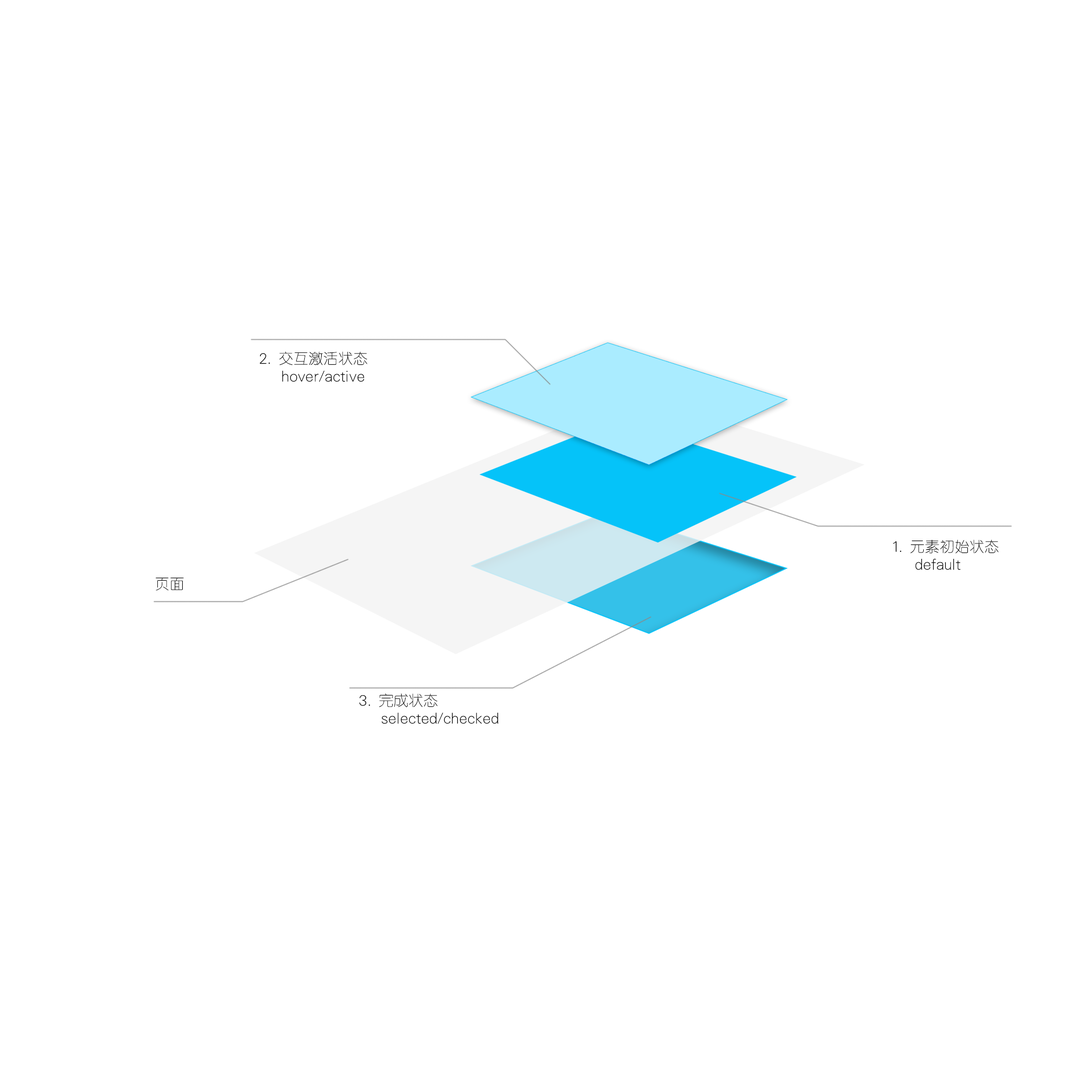
<style>
.page{position:relative;width:1092px;height:1092px;background:#ffffff}
.page>*{position:absolute;margin:0}
.t1{font:14.9px/17.9px "CloudYuanXiGBK";color:#000000}
.t2{font:14.9px/17.9px "CloudYuanXiGBK";color:#000000;text-transform:uppercase}
.t3{font:14.9px "CloudYuanXiGBK";color:#000000}
</style>
<div class="page">
<p class="t1" style="left:260px;top:351px;width:107px;height:31px"><span class="t2">2. 交互激活状态<br>   </span>hover/active</p>
<p class="t2" style="left:893px;top:540px;width:106px;height:30px">1. 元素初始状态<br>   <span class="t1">default</span></p>
<p class="t3" style="left:155px;top:577px;width:29px;height:14px">页面</p>
<p class="t1" style="left:359px;top:693px;width:139px;height:31px"><span class="t2">3. 完成状态<br>   </span>selected/checked</p>
</div>
